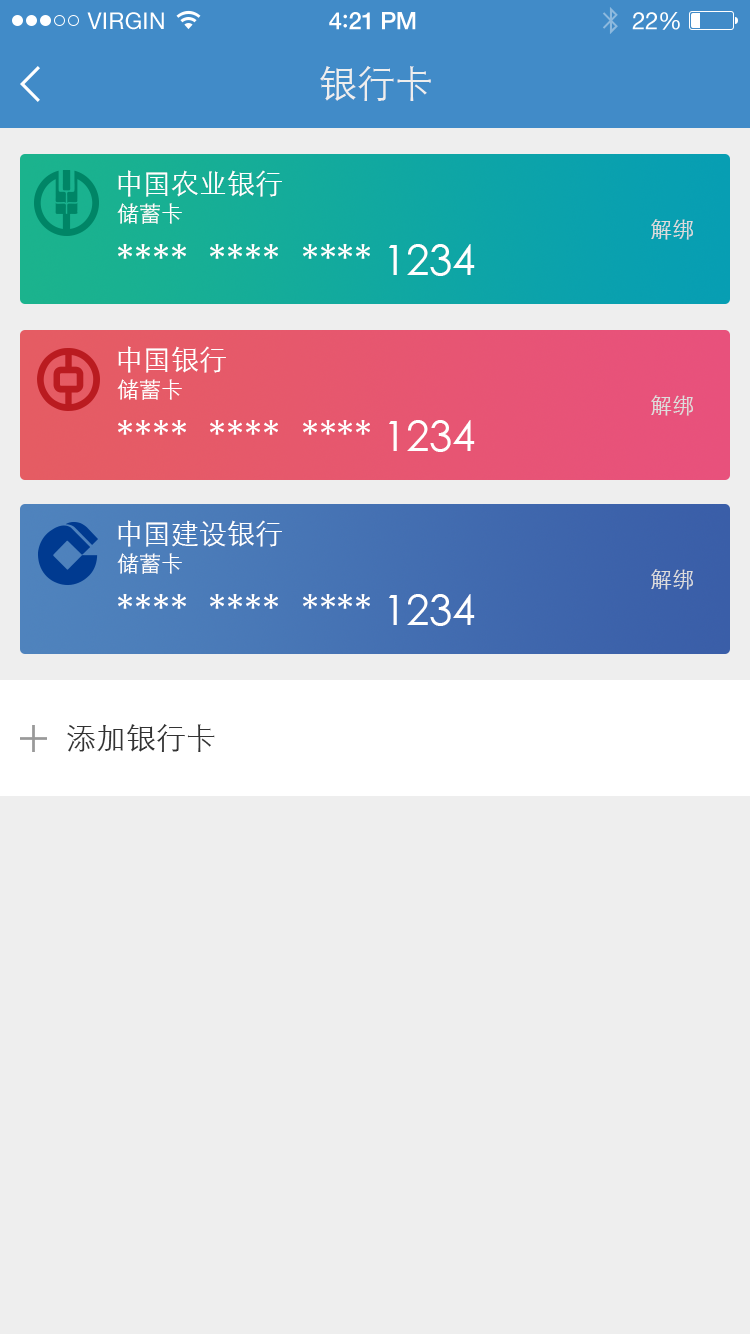
<style>
.page{position:relative;width:750px;height:1334px;background:#eeeeee}
.page>*{position:absolute;margin:0}
.t1{font:23px "HelveticaNeue";letter-spacing:0.02em;color:#ffffff}
.t2{font:24px "HelveticaNeue-Medium";letter-spacing:-0.02em;color:#ffffff}
.t3{font:26px "Avenir-Medium";letter-spacing:-0.02em;color:#ffffff}
.t4{font:24px "HelveticaNeue";letter-spacing:-0.02em;color:#ffffff}
.t5{font:38px "STXihei";color:#eeeeee}
.t6{font:28px "STXihei";color:#ffffff}
.t7{font:22px "STXihei";color:#ffffff}
.t8{font:22px "STXihei";color:#dddddd}
.t9{font:42px "STXihei";color:#ffffff}
.t10{font:30px "STXihei";color:#333333}
</style>
<div class="page">
<p class="t1" style="left:87px;top:12px;width:77px;height:18px">VIRGIN</p>
<p class="t2" style="left:329px;top:12px;width:87px;height:18px">4<span class="t3">:</span>21 PM</p>
<p class="t4" style="left:632px;top:12px;width:48px;height:18px">22%</p>
<p class="t5" style="left:320px;top:66px;width:111px;height:35px">银行卡</p>
<p class="t6" style="left:118px;top:170px;width:164px;height:27px">中国农业银行</p>
<p class="t7" style="left:117px;top:203px;width:65px;height:21px">储蓄卡</p>
<p class="t8" style="left:651px;top:219px;width:42px;height:21px">解绑</p>
<p class="t9" style="left:118px;top:244px;width:357px;height:32px">****  ****  **** 1234</p>
<p class="t6" style="left:118px;top:346px;width:108px;height:27px">中国银行</p>
<p class="t7" style="left:117px;top:379px;width:65px;height:21px">储蓄卡</p>
<p class="t8" style="left:651px;top:395px;width:42px;height:21px">解绑</p>
<p class="t9" style="left:118px;top:420px;width:357px;height:32px">****  ****  **** 1234</p>
<p class="t6" style="left:118px;top:520px;width:164px;height:27px">中国建设银行</p>
<p class="t7" style="left:117px;top:553px;width:65px;height:21px">储蓄卡</p>
<p class="t8" style="left:651px;top:569px;width:42px;height:21px">解绑</p>
<p class="t9" style="left:118px;top:594px;width:357px;height:32px">****  ****  **** 1234</p>
<p class="t10" style="left:67px;top:724px;width:148px;height:28px">添加银行卡</p>
</div>
